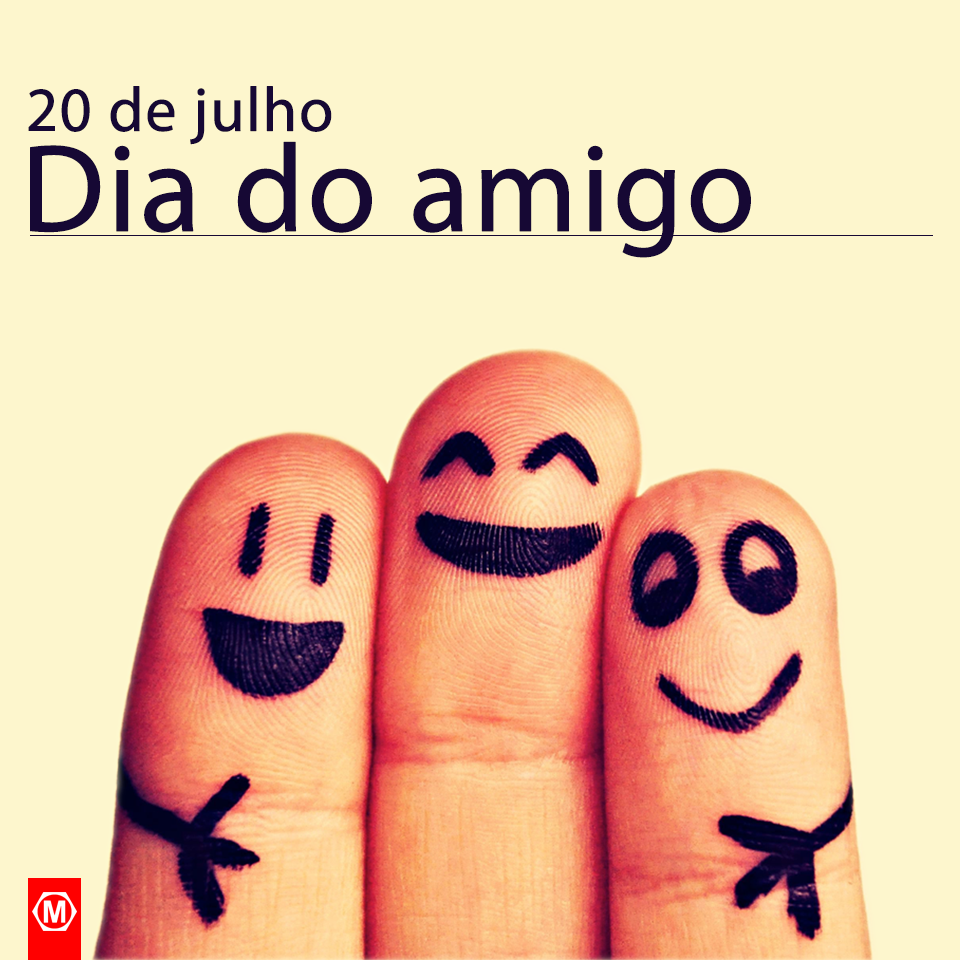
<style>
.page{position:relative;width:960px;height:960px;background:#fdf6cd}
.page>*{position:absolute;margin:0}
.t1{font:125px/50px "MyriadPro-Regular";color:#160834;font-weight:bold}
.t2{font:62.5px/50px "MyriadPro-Regular";color:#160834;font-weight:bold}
</style>
<div class="page">
<p class="t1" style="left:28px;top:86px;width:723px;height:172px"><span class="t2">20 de julho<br><br></span>Dia do amigo</p>
</div>
